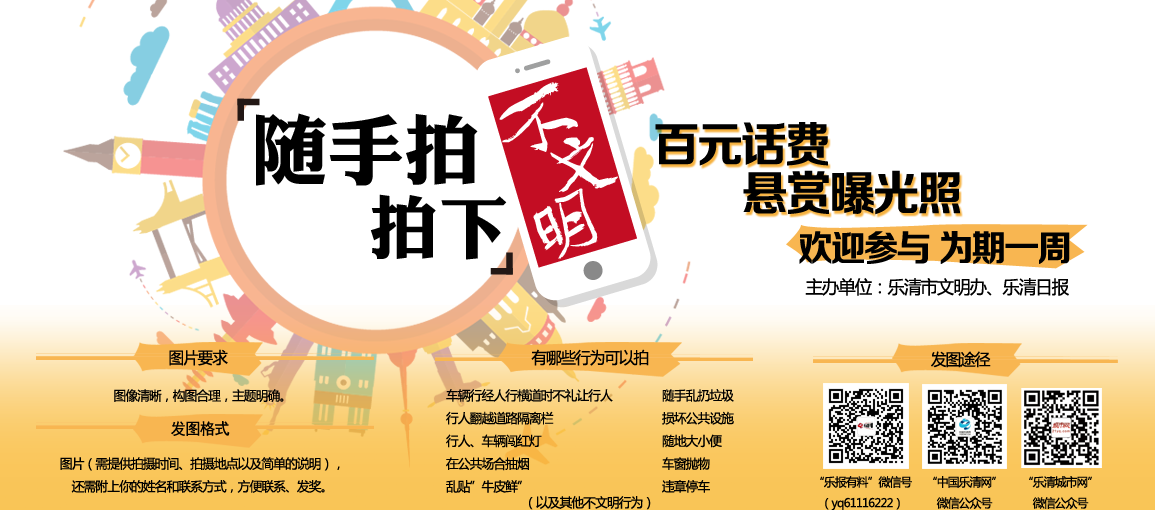
<style>
.page{position:relative;width:1155px;height:510px;background:#ffffff}
.page>*{position:absolute;margin:0}
.t1{font:48px "FZZCHJW--GB1-0";letter-spacing:-0.06em;color:#000000}
.t2{font:48px "FZZCHJW--GB1-0";letter-spacing:-0.06em;color:#000000;scale:0.97 1}
.t3{font:36px "FZZCHJW--GB1-0";letter-spacing:-0.06em;color:#000000;scale:0.97 1}
.t4{font:18px "MicrosoftYaHei";letter-spacing:-0.06em;color:#000000;scale:0.97 1}
.t5{font:16px "MicrosoftYaHei";letter-spacing:-0.06em;color:#000000;scale:0.97 1}
.t6{font:13px "MicrosoftYaHei";letter-spacing:-0.06em;color:#000000;scale:0.97 1}
.t7{font:16px "SimHei";letter-spacing:-0.06em;color:#000000;scale:0.97 1}
.t8{font:12px "MicrosoftYaHei";letter-spacing:-0.06em;color:#000000;scale:0.97 1}
</style>
<div class="page">
<p class="t1" style="left:655px;top:122px;width:173px;height:44px">百元话费</p>
<p class="t2" style="left:743px;top:170px;width:218px;height:45px">悬赏曝光照</p>
<p class="t3" style="left:799px;top:231px;width:271px;height:33px">欢迎参与 为期一周</p>
<p class="t4" style="left:805px;top:278px;width:264px;height:18px">主办单位：乐清市文明办、乐清日报</p>
<p class="t5" style="left:169px;top:349px;width:59px;height:17px">图片要求</p>
<p class="t5" style="left:531px;top:349px;width:118px;height:17px">有哪些行为可以拍</p>
<p class="t5" style="left:931px;top:351px;width:60px;height:17px">发图途径</p>
<p class="t6" style="left:114px;top:389px;width:170px;height:13px">图像清晰，构图合理，主题明确。</p>
<p class="t6" style="left:446px;top:389px;width:167px;height:104px">车辆行经人行横道时不礼让行人<br>行人翻越道路隔离栏<br>行人、车辆闯红灯<br>在公共场合抽烟<br>乱贴”牛皮鲜”</p>
<p class="t6" style="left:662px;top:389px;width:72px;height:104px">随手乱扔垃圾<br>损坏公共设施<br>随地大小便<br>车窗抛物<br>违章停车</p>
<p class="t7" style="left:171px;top:421px;width:59px;height:15px">发图格式</p>
<p class="t6" style="left:60px;top:457px;width:280px;height:36px;text-align:center">图片（需提供拍摄时间、拍摄地点以及简单的说明），<br>还需附上你的姓名和联系方式，方便联系、发奖。</p>
<p class="t8" style="left:820px;top:476px;width:92px;height:35px;text-align:center">“乐报有料”微信号<br>（yq61116222）</p>
<p class="t8" style="left:933px;top:476px;width:63px;height:33px;text-align:center">“中国乐清网”<br>微信公众号</p>
<p class="t8" style="left:1029px;top:476px;width:63px;height:33px;text-align:center">“乐清城市网”<br>微信公众号</p>
<p class="t6" style="left:529px;top:496px;width:122px;height:14px">（以及其他不文明行为）</p>
</div>
